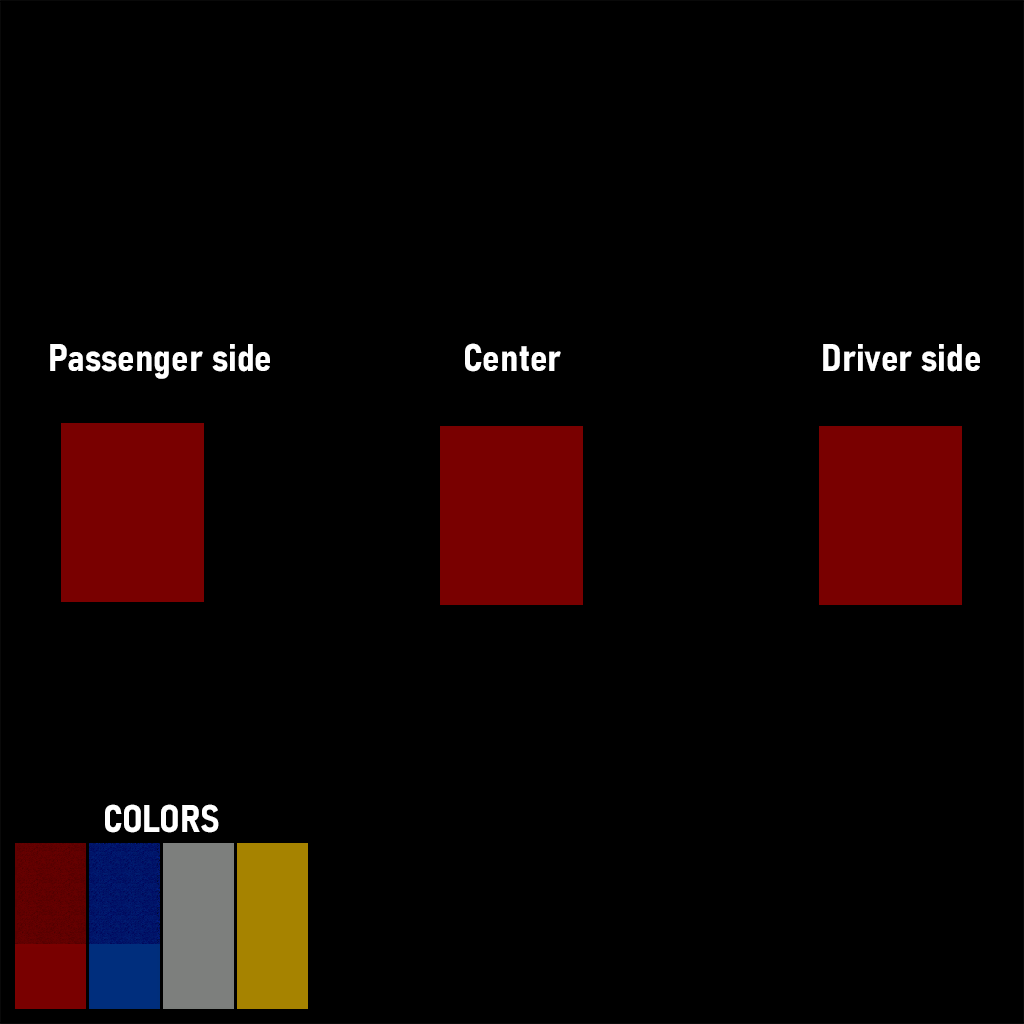
<style>
.page{position:relative;width:1024px;height:1024px;background:#000000}
.page>*{position:absolute;margin:0}
.t1{font:38px "Bahnschrift-BoldSemiCondensed";color:#ffffff}
</style>
<div class="page">
<p class="t1" style="left:50px;top:344px;width:220px;height:35px">Passenger side</p>
<p class="t1" style="left:465px;top:343px;width:96px;height:29px">Center</p>
<p class="t1" style="left:823px;top:344px;width:157px;height:28px">Driver side</p>
<p class="t1" style="left:105px;top:804px;width:114px;height:29px">COLORS</p>
</div>
